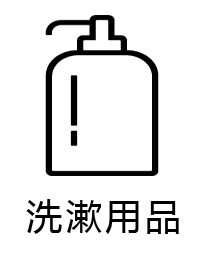
<style>
.page{position:relative;width:200px;height:255px;background:#ffffff}
.page>*{position:absolute;margin:0}
.t1{font:36px "MicrosoftYaHei";letter-spacing:0.1em;color:#000000}
</style>
<div class="page">
<p class="t1" style="left:26px;top:199px;width:153px;height:35px">洗漱用品</p>
</div>
